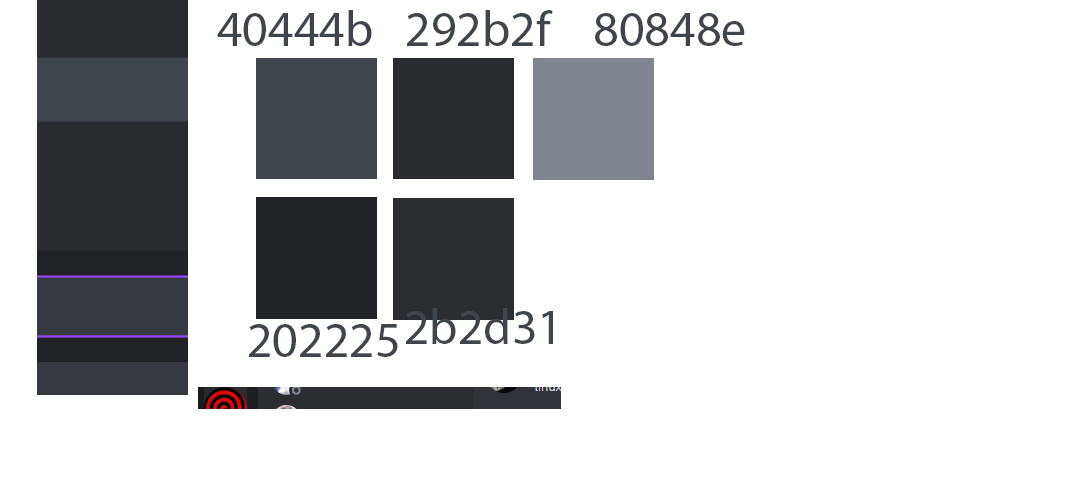
<style>
.page{position:relative;width:1078px;height:504px;background:#ffffff}
.page>*{position:absolute;margin:0}
.t1{font:50px "MyriadPro-Regular";color:#40444b}
</style>
<div class="page">
<p class="t1" style="left:217px;top:10px;width:528px;height:36px">40444b   292b2f    80848e</p>
<p class="t1" style="left:406px;top:308px;width:147px;height:36px">2b2d31</p>
<p class="t1" style="left:249px;top:324px;width:149px;height:33px">202225</p>
</div>
